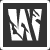
<style>
.page{position:relative;width:50px;height:50px;background:#333333}
.page>*{position:absolute;margin:0}
.t1{font:30px "Insomnia-Regular";color:#ffffff}
</style>
<div class="page">
<p class="t1" style="left:8px;top:9px;width:34px;height:32px">W</p>
</div>
